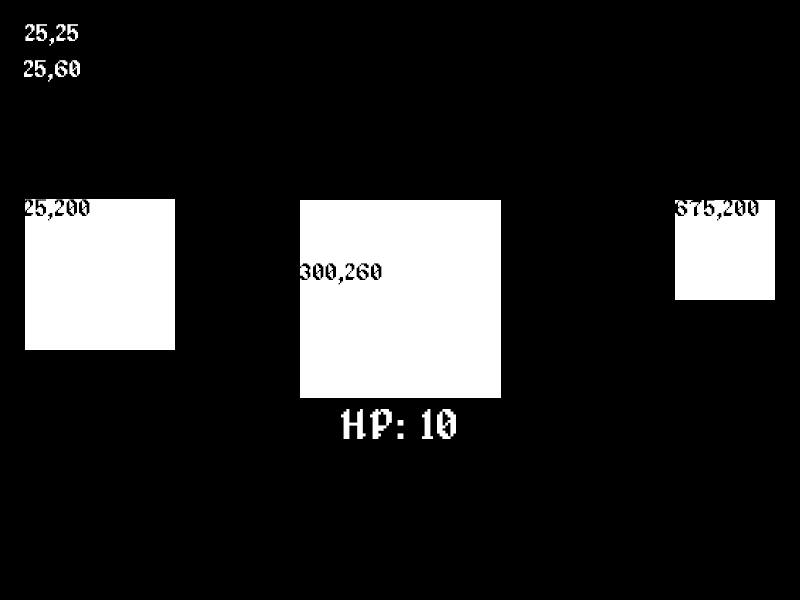
<style>
.page{position:relative;width:800px;height:600px;background:#000000}
.page>*{position:absolute;margin:0}
.t1{font:24.2px "Alagard";letter-spacing:0.029em;color:#ffffff}
.t2{font:24.2px "Alagard";letter-spacing:0.029em;color:#000000}
.t3{font:43.4px "Alagard";letter-spacing:0.029em;color:#ffffff}
</style>
<div class="page">
<p class="t1" style="left:25px;top:24px;width:53px;height:22px">25,25</p>
<p class="t1" style="left:24px;top:60px;width:56px;height:22px">25,60</p>
<p class="t2" style="left:24px;top:199px;width:66px;height:22px">25,200</p>
<p class="t2" style="left:675px;top:199px;width:84px;height:22px">675,200</p>
<p class="t2" style="left:300px;top:263px;width:82px;height:22px">300,260</p>
<p class="t3" style="left:341px;top:409px;width:115px;height:30px">HP: 10</p>
</div>
